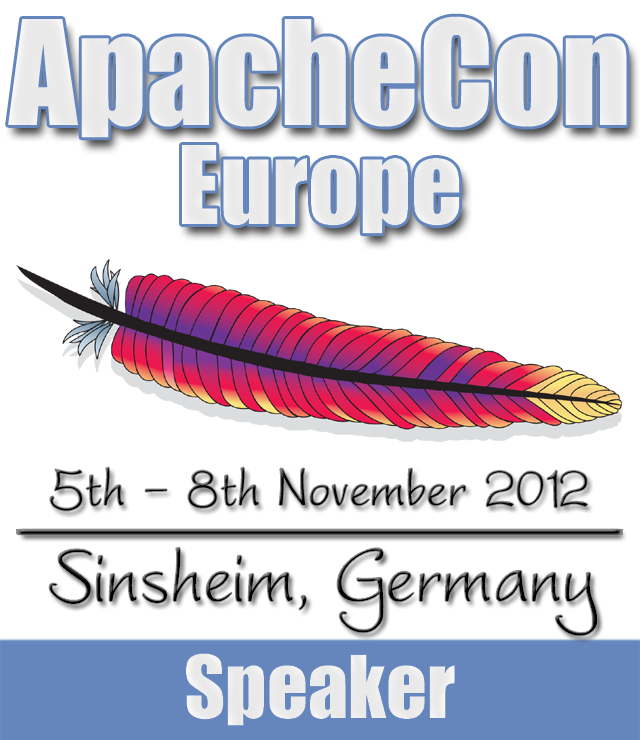
<style>
.page{position:relative;width:640px;height:740px;background:#ffffff}
.page>*{position:absolute;margin:0}
.t1{font:134px "Impact";color:#ffffff}
.t2{font:100px "Impact";color:#ffffff}
.t3{font:70px "WorstveldSling";color:#000000}
.t4{font:100px "WorstveldSling";color:#000000}
.t5{font:80px "Impact";color:#ffffff}
</style>
<div class="page">
<p class="t1" style="left:8px;top:16px;width:619px;height:122px">ApacheCon</p>
<p class="t2" style="left:182px;top:145px;width:278px;height:89px">Europe</p>
<p class="t3" style="left:50px;top:467px;width:538px;height:44px">5th - 8th November 2012</p>
<p class="t4" style="left:49px;top:547px;width:549px;height:89px">Sinsheim, Germany</p>
<p class="t5" style="left:186px;top:653px;width:269px;height:73px">Speaker</p>
</div>
